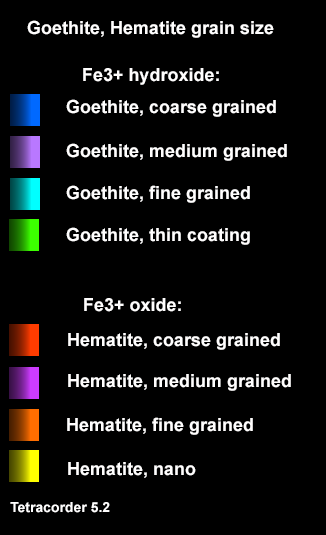
<style>
.page{position:relative;width:326px;height:535px;background:#000000}
.page>*{position:absolute;margin:0}
.t1{font:18px "Arial-BoldMT";color:#fffefe}
.t2{font:14px "Arial-BoldMT";color:#fffefe}
</style>
<div class="page">
<p class="t1" style="left:27px;top:20px;width:247px;height:18px">Goethite, Hematite grain size</p>
<p class="t1" style="left:83px;top:68px;width:136px;height:17px">Fe3+ hydroxide:</p>
<p class="t1" style="left:66px;top:99px;width:210px;height:18px">Goethite, coarse grained</p>
<p class="t1" style="left:66px;top:143px;width:221px;height:18px">Goethite, medium grained</p>
<p class="t1" style="left:66px;top:185px;width:184px;height:18px">Goethite, fine grained</p>
<p class="t1" style="left:66px;top:227px;width:184px;height:18px">Goethite, thin coating</p>
<p class="t1" style="left:84px;top:298px;width:97px;height:14px">Fe3+ oxide:</p>
<p class="t1" style="left:68px;top:333px;width:212px;height:17px">Hematite, coarse grained</p>
<p class="t1" style="left:68px;top:374px;width:223px;height:17px">Hematite, medium grained</p>
<p class="t1" style="left:67px;top:417px;width:186px;height:18px">Hematite, fine grained</p>
<p class="t1" style="left:68px;top:462px;width:128px;height:16px">Hematite, nano</p>
<p class="t2" style="left:10px;top:502px;width:100px;height:11px">Tetracorder 5.2</p>
</div>
